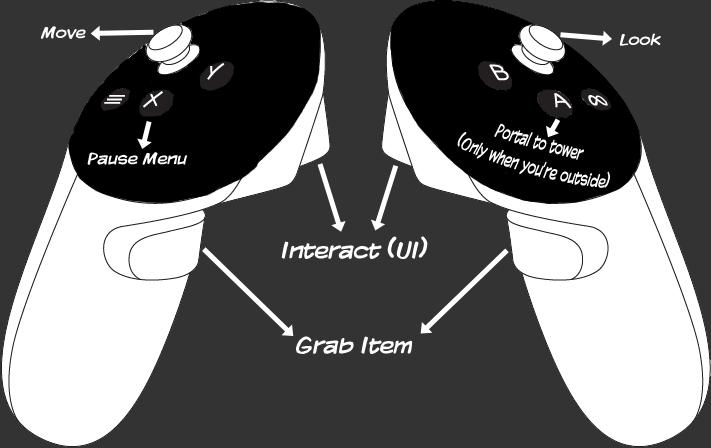
<style>
.page{position:relative;width:711px;height:448px;background:#333333}
.page>*{position:absolute;margin:0}
.t1{font:17px "KomikaDisplay";color:#ffffff}
.t2{font:12px "KomikaDisplay";color:#ffffff}
.t3{font:24px "KomikaDisplay";color:#ffffff}
</style>
<div class="page">
<p class="t1" style="left:40px;top:26px;width:46px;height:13px">Move</p>
<p class="t1" style="left:619px;top:33px;width:42px;height:13px">Look</p>
<p class="t2" style="left:457px;top:123px;width:154px;height:65px;text-align:center;rotate:16deg">Portal to tower<br>(Only when you're outside)</p>
<p class="t1" style="left:87px;top:152px;width:101px;height:13px">Pause Menu</p>
<p class="t3" style="left:281px;top:236px;width:147px;height:24px">Interact (UI)</p>
<p class="t3" style="left:296px;top:336px;width:117px;height:19px">Grab Item</p>
</div>
